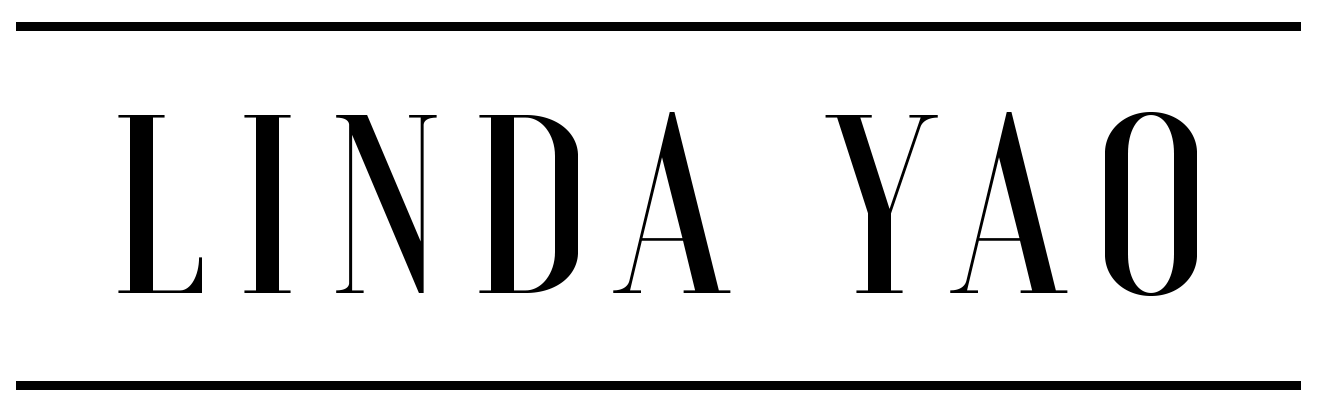
<style>
.page{position:relative;width:1320px;height:419px;background:#ffffff}
.page>*{position:absolute;margin:0}
.t1{font:254.1px "Voga-Medium";letter-spacing:0.1em;color:#000000;scale:1.14 1}
</style>
<div class="page">
<p class="t1" style="left:118px;top:112px;width:1079px;height:184px">LINDA YAO</p>
</div>
